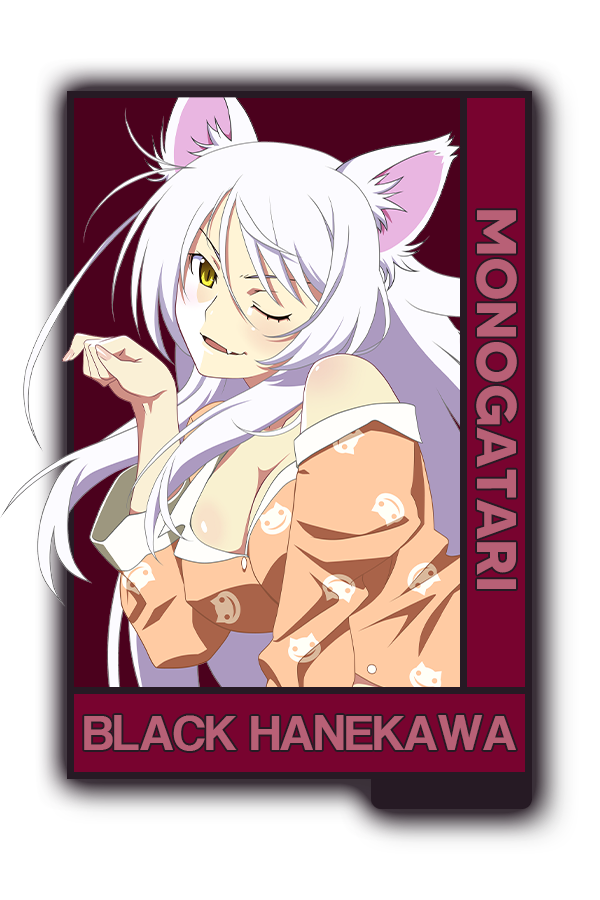
<style>
.page{position:relative;width:600px;height:900px;background:#ffffff}
.page>*{position:absolute;margin:0}
.t1{font:55.8px "MADETOMMY-Bold";color:#b86076}
.t2{font:52.4px "CoolveticaRg-Regular";color:#b86076}
</style>
<div class="page">
<p class="t1" style="left:476px;top:210px;width:41px;height:379px;rotate:90deg">MONOGATARI</p>
<p class="t2" style="left:84px;top:715px;width:432px;height:36px">BLACK HANEKAWA</p>
</div>
